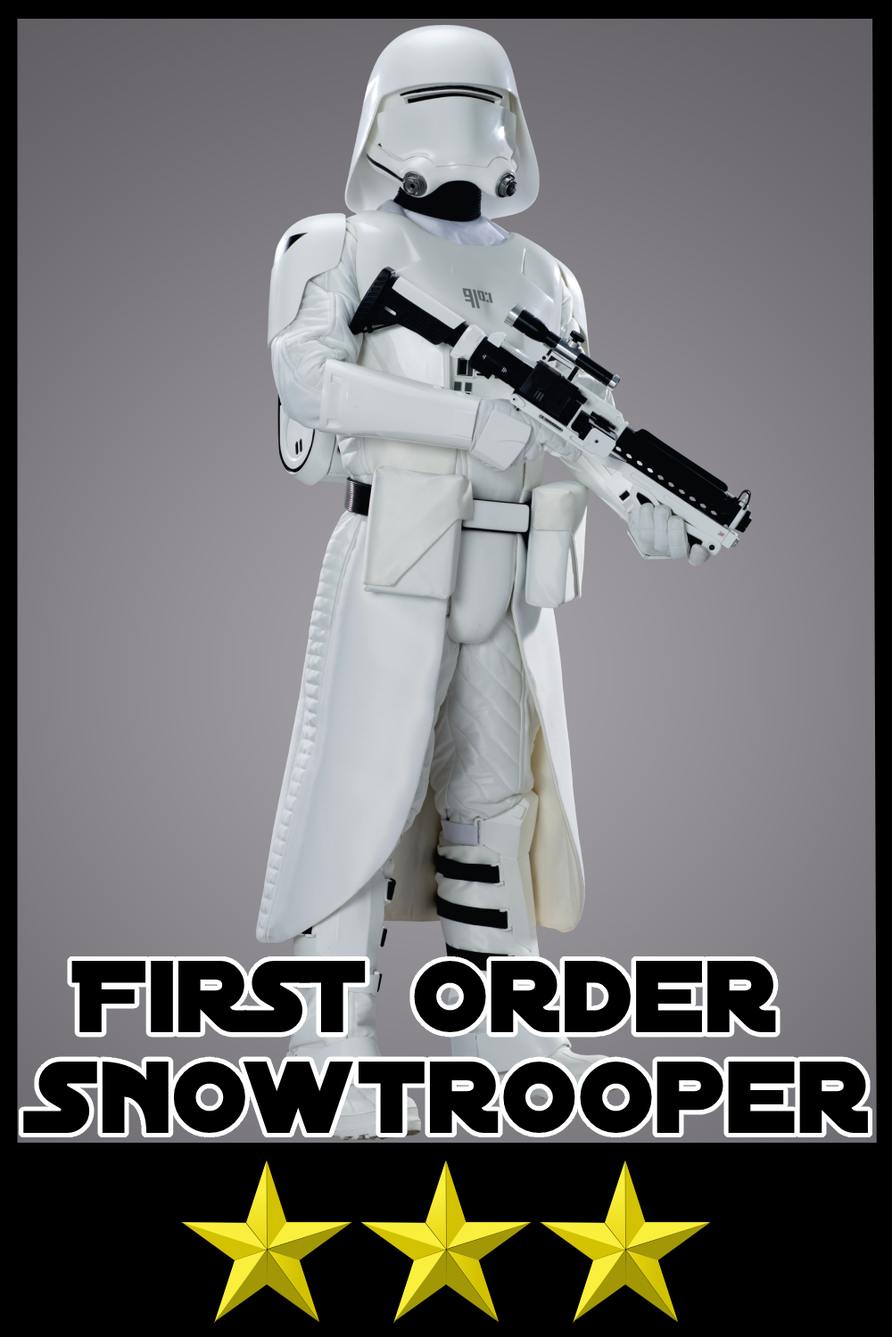
<style>
.page{position:relative;width:892px;height:1337px;background:#000000}
.page>*{position:absolute;margin:0}
.t1{font:109.7px/100.7px "DistantGalaxy";color:#000000}
</style>
<div class="page">
<p class="t1" style="left:23px;top:961px;width:845px;height:172px;text-align:center">First Order <br>Snowtrooper</p>
</div>
